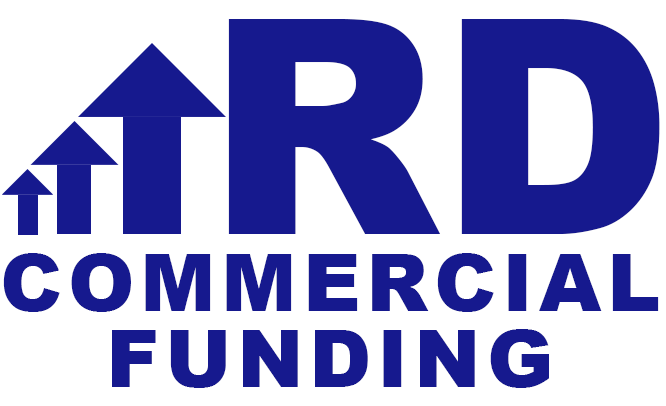
<style>
.page{position:relative;width:666px;height:406px;background:#ffffff}
.page>*{position:absolute;margin:0}
.t1{font:300px "Arial-Black";color:#16198e}
.t2{font:79.7px "Arial-Black";letter-spacing:0.075em;color:#16198e}
</style>
<div class="page">
<p class="t1" style="left:228px;top:19px;width:432px;height:215px">RD</p>
<p class="t2" style="left:3px;top:253px;width:656px;height:59px">COMMERCIAL</p>
<p class="t2" style="left:112px;top:329px;width:437px;height:59px">FUNDING</p>
</div>
